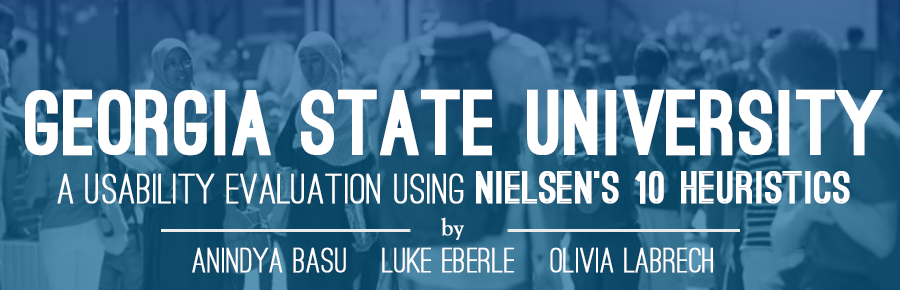
<style>
.page{position:relative;width:900px;height:290px}
.page>*{position:absolute;margin:0}
.t1{font:87px "OstrichSans-Black";color:#ffffff;font-weight:bold}
.t2{font:43.5px "OstrichSans-Medium";color:#ffffff;font-weight:bold}
.t3{font:43.5px "OstrichSans-Bold";color:#ffffff;font-weight:bold}
.t4{font:24px "GoudyOldStyleT-Regular";color:#ffffff;font-weight:bold}
.t5{font:36px "OstrichSans-Medium";color:#ffffff;font-weight:bold}
</style>
<div class="page">
<p class="t1" style="left:25px;top:89px;width:858px;height:67px">Georgia State University</p>
<p class="t2" style="left:57px;top:171px;width:793px;height:33px">a usability evaluation using <span class="t3">nielsen’s 10 heuristics</span></p>
<p class="t4" style="left:441px;top:217px;width:23px;height:23px">by</p>
<p class="t5" style="left:192px;top:247px;width:521px;height:26px">anindya basu    luke eberle    olivia labrech</p>
</div>
